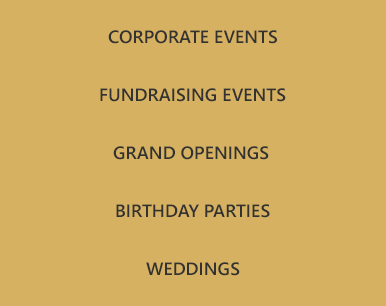
<style>
.page{position:relative;width:386px;height:306px;background:#d6b161}
.page>*{position:absolute;margin:0}
.t1{font:18px "SegoeUI-Semibold";color:#323232}
</style>
<div class="page">
<p class="t1" style="left:108px;top:30px;width:169px;height:14px">CORPORATE EVENTS</p>
<p class="t1" style="left:100px;top:88px;width:186px;height:14px">FUNDRAISING EVENTS</p>
<p class="t1" style="left:113px;top:146px;width:156px;height:14px">GRAND OPENINGS</p>
<p class="t1" style="left:116px;top:204px;width:154px;height:14px">BIRTHDAY PARTIES</p>
<p class="t1" style="left:146px;top:262px;width:94px;height:14px">WEDDINGS</p>
</div>
